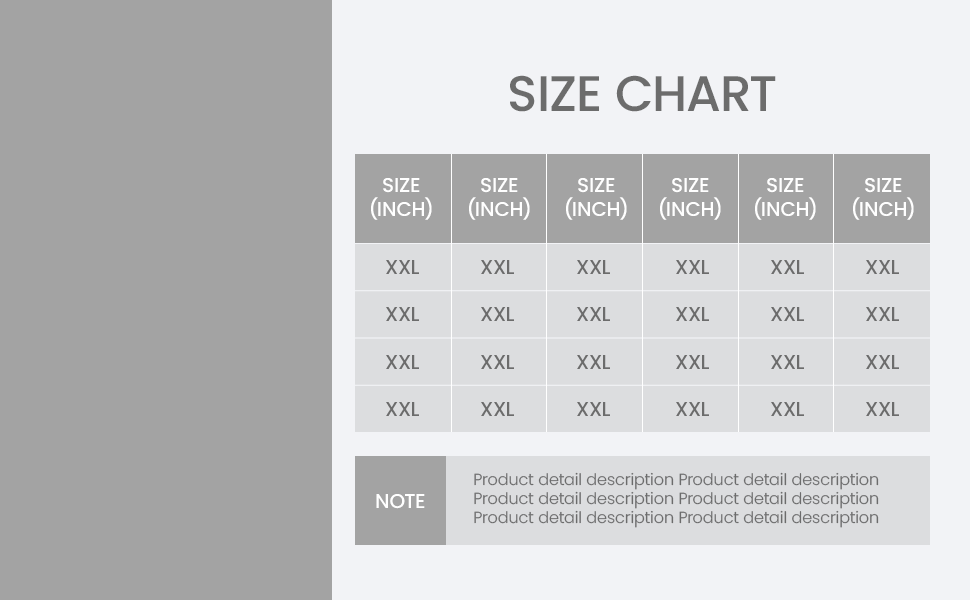
<style>
.page{position:relative;width:970px;height:600px;background:#a3a3a3}
.page>*{position:absolute;margin:0}
.t1{font:50px "Poppins-Medium";color:#6c6c6c;text-transform:uppercase}
.t2{font:20px "Poppins-Medium";color:#ffffff;text-transform:uppercase}
.t3{font:20px "Poppins-Medium";color:#6c6c6c;text-transform:uppercase}
.t4{font:16px "Poppins-Light";color:#6c6c6c}
</style>
<div class="page">
<p class="t1" style="left:510px;top:75px;width:266px;height:37px">SIZE CHART</p>
<p class="t2" style="left:371px;top:178px;width:61px;height:42px;text-align:center">size<br>(INCH)</p>
<p class="t2" style="left:469px;top:178px;width:61px;height:42px;text-align:center">size<br>(INCH)</p>
<p class="t2" style="left:566px;top:178px;width:61px;height:42px;text-align:center">size<br>(INCH)</p>
<p class="t2" style="left:660px;top:178px;width:61px;height:42px;text-align:center">size<br>(INCH)</p>
<p class="t2" style="left:755px;top:178px;width:61px;height:42px;text-align:center">size<br>(INCH)</p>
<p class="t2" style="left:853px;top:178px;width:61px;height:42px;text-align:center">size<br>(INCH)</p>
<p class="t3" style="left:386px;top:260px;width:33px;height:14px">XXL</p>
<p class="t3" style="left:481px;top:260px;width:33px;height:14px">XXL</p>
<p class="t3" style="left:577px;top:260px;width:33px;height:14px">XXL</p>
<p class="t3" style="left:676px;top:260px;width:33px;height:14px">XXL</p>
<p class="t3" style="left:771px;top:260px;width:33px;height:14px">XXL</p>
<p class="t3" style="left:866px;top:260px;width:33px;height:14px">XXL</p>
<p class="t3" style="left:386px;top:307px;width:33px;height:14px">XXL</p>
<p class="t3" style="left:481px;top:307px;width:33px;height:14px">XXL</p>
<p class="t3" style="left:577px;top:307px;width:33px;height:14px">XXL</p>
<p class="t3" style="left:676px;top:307px;width:33px;height:14px">XXL</p>
<p class="t3" style="left:771px;top:307px;width:33px;height:14px">XXL</p>
<p class="t3" style="left:866px;top:307px;width:33px;height:14px">XXL</p>
<p class="t3" style="left:386px;top:355px;width:33px;height:14px">XXL</p>
<p class="t3" style="left:481px;top:355px;width:33px;height:14px">XXL</p>
<p class="t3" style="left:577px;top:355px;width:33px;height:14px">XXL</p>
<p class="t3" style="left:676px;top:355px;width:33px;height:14px">XXL</p>
<p class="t3" style="left:771px;top:355px;width:33px;height:14px">XXL</p>
<p class="t3" style="left:866px;top:355px;width:33px;height:14px">XXL</p>
<p class="t3" style="left:386px;top:402px;width:33px;height:14px">XXL</p>
<p class="t3" style="left:481px;top:402px;width:33px;height:14px">XXL</p>
<p class="t3" style="left:577px;top:402px;width:33px;height:14px">XXL</p>
<p class="t3" style="left:676px;top:402px;width:33px;height:14px">XXL</p>
<p class="t3" style="left:771px;top:402px;width:33px;height:14px">XXL</p>
<p class="t3" style="left:866px;top:402px;width:33px;height:14px">XXL</p>
<p class="t4" style="left:474px;top:472px;width:405px;height:56px">Product detail description Product detail description<br>Product detail description Product detail description<br>Product detail description Product detail description</p>
<p class="t2" style="left:376px;top:494px;width:49px;height:15px">NOTE</p>
</div>
